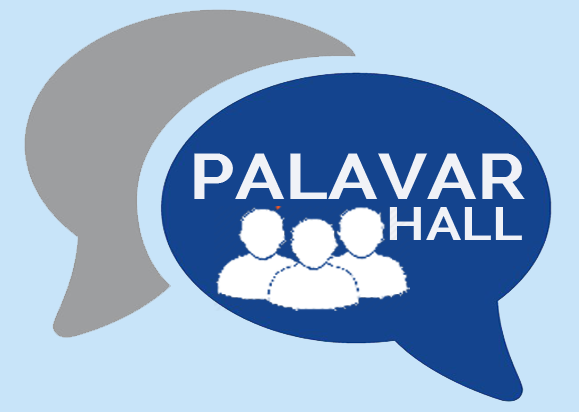
<style>
.page{position:relative;width:579px;height:412px;background:#c8e4f9}
.page>*{position:absolute;margin:0}
.t1{font:64px "Raleway-Bold";letter-spacing:0.01em;color:#f0f2f7;text-transform:uppercase;scale:1.13 1}
.t2{font:45.8px "Raleway-Bold";letter-spacing:0.01em;color:#f0f2f7;text-transform:uppercase;scale:1.13 1}
</style>
<div class="page">
<p class="t1" style="left:194px;top:153px;width:331px;height:46px">Palavar</p>
<p class="t2" style="left:389px;top:207px;width:133px;height:33px">hall</p>
</div>
